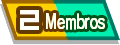
<style>
.page{position:relative;width:120px;height:45px}
.page>*{position:absolute;margin:0}
.t1{font:20px "RodinPro-DB";letter-spacing:-0.05em;color:#fffeef;scale:0.71 1}
</style>
<div class="page">
<p class="t1" style="left:46px;top:13px;width:59px;height:17px">Membros</p>
</div>
